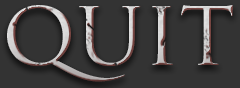
<style>
.page{position:relative;width:240px;height:88px;background:#333333}
.page>*{position:absolute;margin:0}
.t1{font:92.1px "TrajanPro-Regular"}
</style>
<div class="page">
<p class="t1" style="left:7px;top:5px;width:226px;height:77px">quit</p>
</div>
